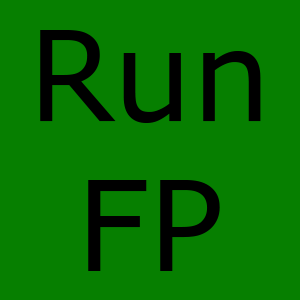
<style>
.page{position:relative;width:300px;height:300px;background:#067f00}
.page>*{position:absolute;margin:0}
.t1{font:125px "Verdana";color:#000000}
</style>
<div class="page">
<p class="t1" style="left:40px;top:30px;width:221px;height:241px;text-align:center">Run<br>FP</p>
</div>
